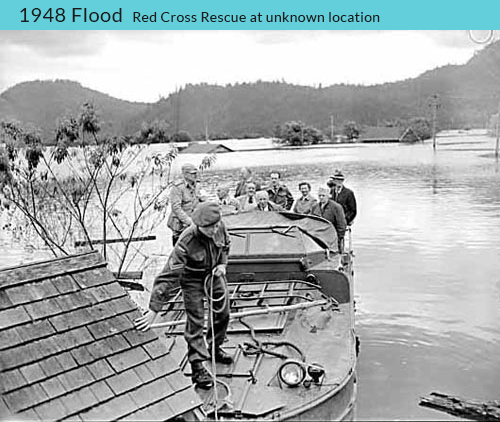
<style>
.page{position:relative;width:500px;height:422px}
.page>*{position:absolute;margin:0}
.t1{font:20px "Lato-Regular";letter-spacing:0.025em;color:#1a1a1a}
.t2{font:14px "Lato-Regular";letter-spacing:0.025em;color:#1a1a1a}
</style>
<div class="page">
<p class="t1" style="left:20px;top:8px;width:102px;height:14px">1948 Flood</p>
<p class="t2" style="left:133px;top:12px;width:247px;height:10px">Red Cross Rescue at unknown location</p>
</div>
